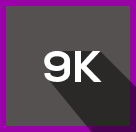
<style>
.page{position:relative;width:136px;height:132px;background:#545150}
.page>*{position:absolute;margin:0}
.t1{font:44px "NexaBold";color:#ffffff}
</style>
<div class="page">
<p class="t1" style="left:44px;top:51px;width:58px;height:31px">9K</p>
</div>
